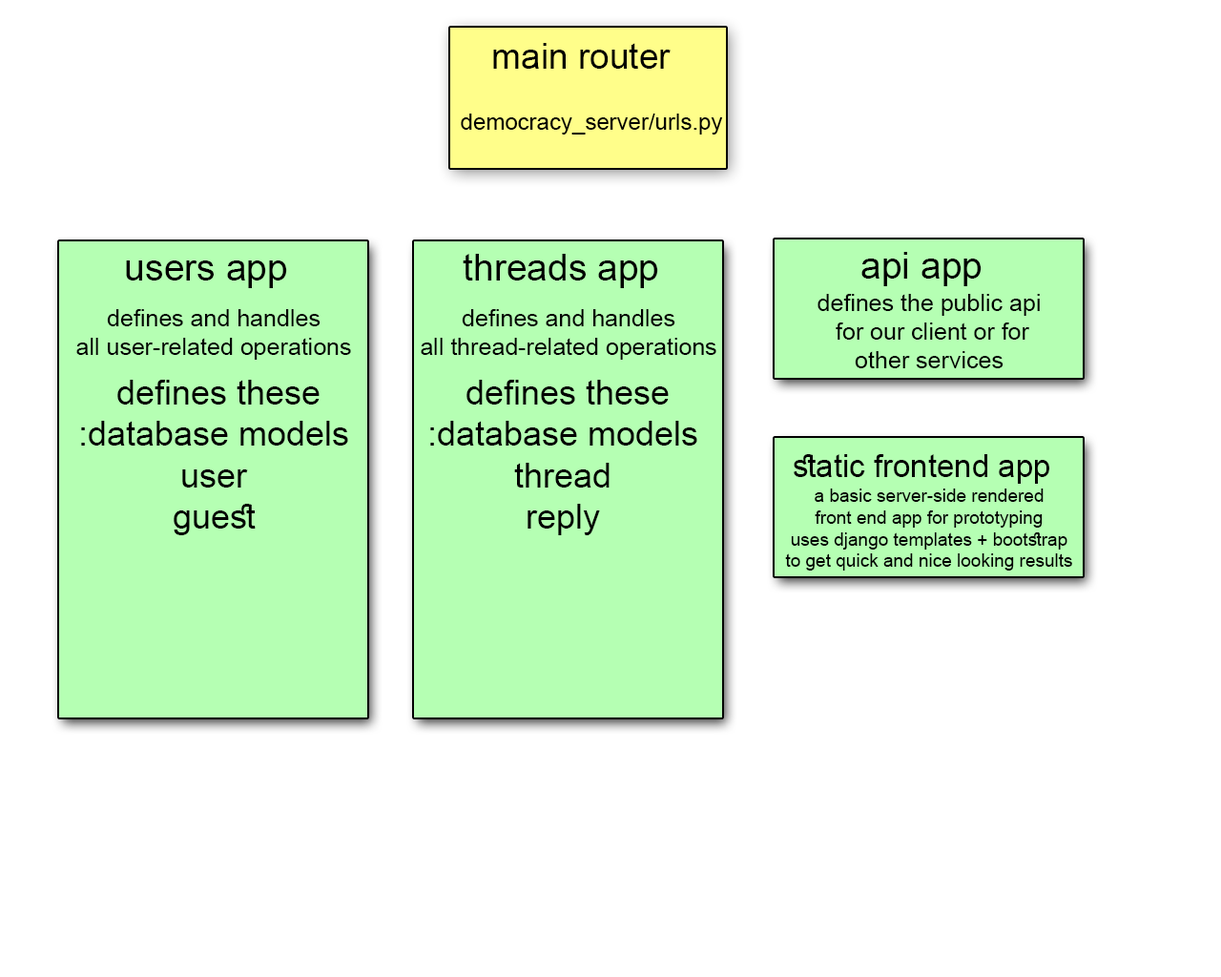
<style>
.page{position:relative;width:1221px;height:977px;background:#ffffff}
.page>*{position:absolute;margin:0}
.t1{font:35.3px "ArialMT";color:#000000}
.t2{font:22.9px "ArialMT";color:#000000}
.t3{font:37.2px "ArialMT";color:#000000}
.t4{font:23.9px "ArialMT";color:#000000}
.t5{font:34.3px "ArialMT";color:#000000}
.t6{font:31.5px "ArialMT";color:#000000}
.t7{font:18.1px "ArialMT";color:#000000}
</style>
<div class="page">
<p class="t1" style="left:493px;top:43px;width:178px;height:26px">main router</p>
<p class="t2" style="left:461px;top:114px;width:262px;height:20px">democracy_server/urls.py</p>
<p class="t3" style="left:463px;top:254px;width:195px;height:34px">threads app</p>
<p class="t3" style="left:861px;top:252px;width:120px;height:34px">api app</p>
<p class="t3" style="left:126px;top:260px;width:161px;height:28px">users app</p>
<p class="t4" style="left:817px;top:294px;width:223px;height:74px;text-align:center">defines the public api<br>for our client or for <br>other services</p>
<p class="t4" style="left:76px;top:309px;width:275px;height:51px;text-align:center">defines and handles<br>all user-related operations</p>
<p class="t4" style="left:421px;top:309px;width:295px;height:51px;text-align:center">defines and handles<br>all thread-related operations</p>
<p class="t5" style="left:81px;top:380px;width:267px;height:155px;text-align:center">defines these <br>database models:<br>user<br>guest</p>
<p class="t5" style="left:430px;top:380px;width:267px;height:155px;text-align:center">defines these <br>database models:<br>thread<br>reply</p>
<p class="t6" style="left:794px;top:454px;width:255px;height:30px">static frontend app</p>
<p class="t7" style="left:785px;top:488px;width:287px;height:82px;text-align:center">a basic server-side rendered<br>front end app for prototyping<br>uses django templates + bootstrap<br>to get quick and nice looking results</p>
</div>
